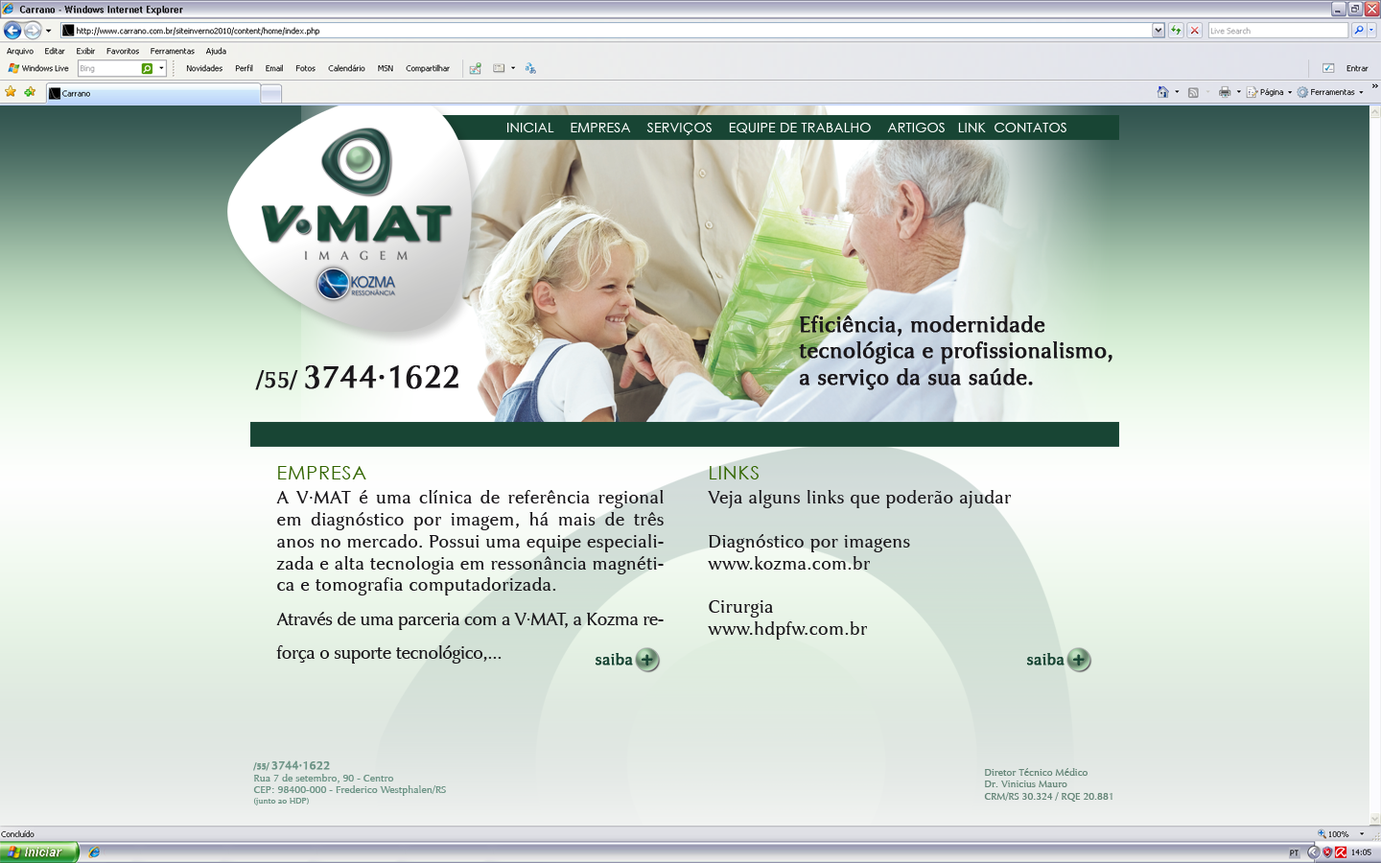
<style>
.page{position:relative;width:1381px;height:863px}
.page>*{position:absolute;margin:0}
.t1{font:13px "CenturyGothic";letter-spacing:0.035em;color:#ffffff}
.t2{font:22px "JaguarJCBook";color:#1a171b;font-weight:bold}
.t3{font:31.6px "JaguarJCBook";color:#1a171b;font-weight:bold}
.t4{font:22.6px "JaguarJCBook";color:#1a171b;font-weight:bold}
.t5{font:19.4px "CenturyGothic";letter-spacing:0.035em;color:#336600}
.t6{font:18px/22px "JaguarJCBook";letter-spacing:0.02em;color:#1a171b}
.t7{font:18px/34px "JaguarJCBook";letter-spacing:-0.02em;color:#1a171b}
.t8{font:18px/22px "JaguarJCBook";letter-spacing:-0.02em;color:#1a171b}
.t9{font:16px "JaguarJCBook";color:#184534;font-weight:bold}
.t10{font:10.1px "JaguarJCBook";color:#6d9486}
.t11{font:8.4px "JaguarJCBook";color:#6d9486;font-weight:bold}
.t12{font:11.8px "JaguarJCBook";color:#6d9486;font-weight:bold}
.t13{font:8.4px "JaguarJCBook";color:#6d9486}
.t14{font:10px "JaguarJCBook";color:#658678}
</style>
<div class="page">
<p class="t1" style="left:507px;top:123px;width:560px;height:12px">INICIAL    EMPRESA    SERVIÇOS    EQUIPE DE TRABALHO    ARTIGOS   LINK  CONTATOS</p>
<p class="t2" style="left:799px;top:316px;width:314px;height:74px">Eficiência, modernidade <br>tecnológica e profissionalismo, <br>a serviço da sua saúde.</p>
<p class="t3" style="left:255px;top:365px;width:204px;height:25px"><span class="t4">/55/ </span>3744·1622</p>
<p class="t5" style="left:278px;top:466px;width:88px;height:14px">EMPRESA</p>
<p class="t5" style="left:710px;top:466px;width:49px;height:14px">LINKS</p>
<p class="t6" style="left:276px;top:490px;width:388px;height:174px;text-align:justify">A V·MAT é uma clínica de referência regional em diagnóstico por imagem, há mais de três anos no mercado. Possui uma equipe especializada e alta tecnologia em ressonância magnética e tomografia computadorizada.<br><span class="t7">Através de uma parceria com a V·MAT, a Kozma reforça </span><span class="t8">o suporte tecnológico,...</span></p>
<p class="t6" style="left:708px;top:490px;width:303px;height:150px;text-align:justify">Veja alguns links que poderão ajudar<br><br>Diagnóstico por imagens<br>www.kozma.com.br<br><br>Cirurgia<br>www.hdpfw.com.br</p>
<p class="t9" style="left:596px;top:653px;width:37px;height:13px">saiba</p>
<p class="t9" style="left:1027px;top:653px;width:38px;height:13px">saiba</p>
<p class="t9" style="left:642px;top:655px;width:11px;height:11px">+</p>
<p class="t9" style="left:1073px;top:655px;width:12px;height:11px">+</p>
<p class="t10" style="left:253px;top:761px;width:193px;height:45px"><span class="t11">/55/ </span><span class="t12">3744·1622<br></span>Rua 7 de setembro, 90 - Centro<br>CEP: 98400-000 - Frederico Westphalen/RS<br><span class="t13">(junto ao HDP)</span></p>
<p class="t14" style="left:984px;top:768px;width:129px;height:34px">Diretor Técnico Médico<br>Dr. Vinicius Mauro <br>CRM/RS 30.324 / RQE 20.881</p>
</div>
